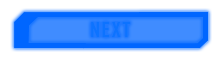
<style>
.page{position:relative;width:220px;height:60px;background:#ffffff}
.page>*{position:absolute;margin:0}
.t1{font:20px "AgencyFB-Bold";letter-spacing:0.1em;color:#0d73ff}
</style>
<div class="page">
<p class="t1" style="left:91px;top:22px;width:40px;height:15px">NEXT</p>
</div>
